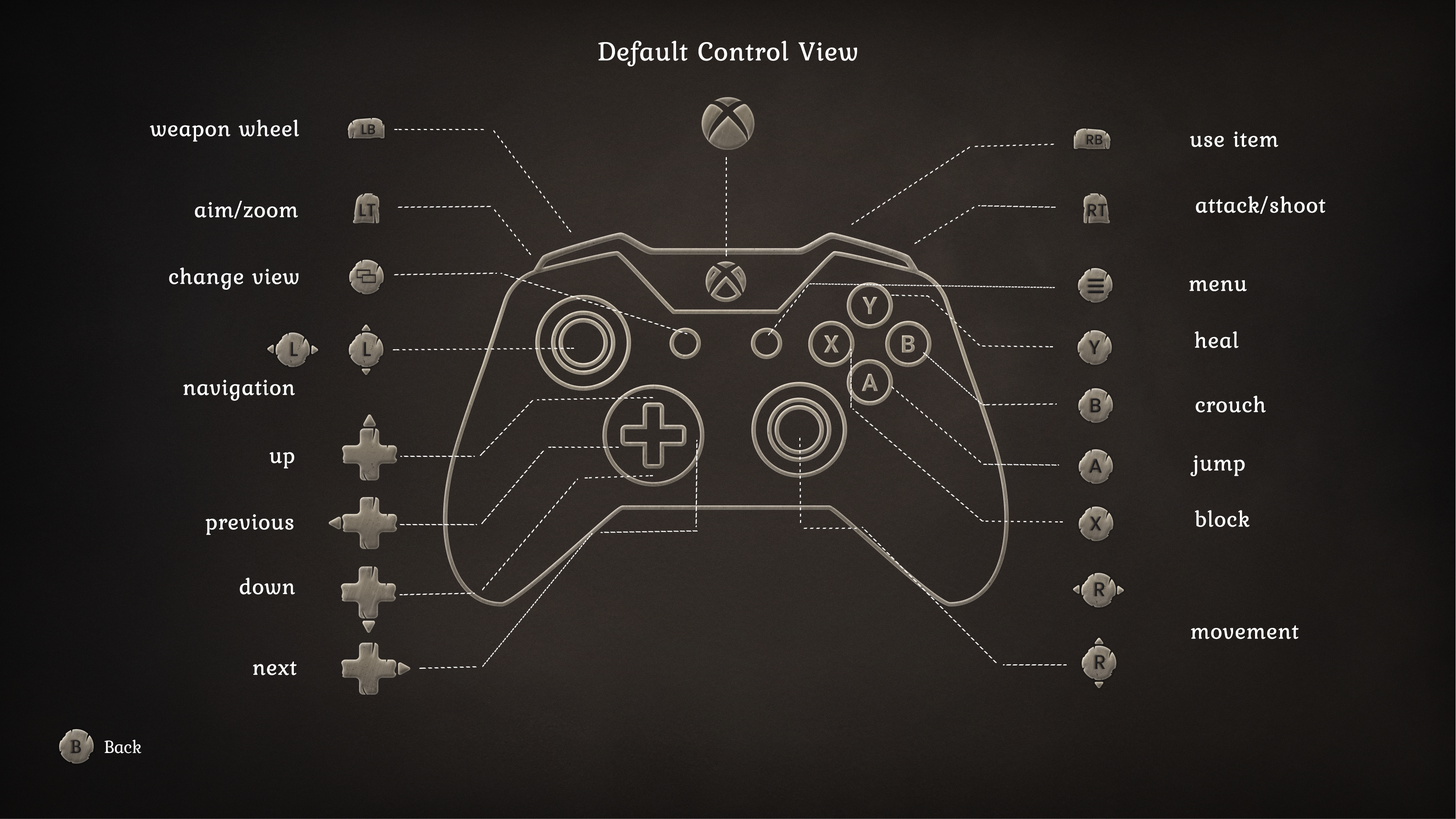
<style>
.page{position:relative;width:1456px;height:819px}
.page>*{position:absolute;margin:0}
.t1{font:27.3px "Kurale-Regular";color:#ffffff;font-weight:bold}
.t2{font:22.7px "Kurale-Regular";color:#ffffff;font-weight:bold}
.t3{font:13.6px "Poppins-Regular";color:#201e1e;font-weight:bold}
.t4{font:17.1px "Poppins-Regular";color:#201e1e;font-weight:bold}
.t5{font:19.6px "Poppins-Regular";color:#201e1e;font-weight:bold}
.t6{font:19.6px "Kurale-Regular";color:#201e1e;font-weight:bold}
.t7{font:18.2px "Kurale-Regular";letter-spacing:-0.02em;color:#ffffff}
</style>
<div class="page">
<p class="t1" style="left:598px;top:41px;width:259px;height:25px">Default Control View</p>
<p class="t2" style="left:150px;top:119px;width:149px;height:23px">weapon wheel</p>
<p class="t3" style="left:362px;top:124px;width:13px;height:10px">LB</p>
<p class="t3" style="left:1087px;top:135px;width:16px;height:9px">RB</p>
<p class="t2" style="left:1190px;top:131px;width:89px;height:16px">use item</p>
<p class="t2" style="left:1196px;top:196px;width:130px;height:18px">attack/shoot</p>
<p class="t2" style="left:195px;top:201px;width:103px;height:18px">aim/zoom</p>
<p class="t4" style="left:360px;top:204px;width:15px;height:12px">LT</p>
<p class="t4" style="left:1088px;top:204px;width:19px;height:12px">RT</p>
<p class="t2" style="left:169px;top:267px;width:129px;height:23px">change view</p>
<p class="t2" style="left:1189px;top:280px;width:58px;height:11px">menu</p>
<p class="t5" style="left:1089px;top:340px;width:11px;height:14px">Y</p>
<p class="t2" style="left:1195px;top:331px;width:44px;height:17px">heal</p>
<p class="t5" style="left:291px;top:342px;width:7px;height:14px">L</p>
<p class="t5" style="left:364px;top:342px;width:7px;height:14px">L</p>
<p class="t2" style="left:183px;top:380px;width:112px;height:21px">navigation</p>
<p class="t5" style="left:1091px;top:398px;width:10px;height:15px">B</p>
<p class="t2" style="left:1195px;top:395px;width:71px;height:18px">crouch</p>
<p class="t2" style="left:270px;top:452px;width:24px;height:17px">up</p>
<p class="t5" style="left:1089px;top:459px;width:13px;height:14px">A</p>
<p class="t2" style="left:1190px;top:455px;width:55px;height:21px">jump</p>
<p class="t2" style="left:1195px;top:510px;width:55px;height:17px">block</p>
<p class="t2" style="left:206px;top:514px;width:87px;height:21px">previous</p>
<p class="t5" style="left:1090px;top:516px;width:11px;height:14px">X</p>
<p class="t2" style="left:240px;top:577px;width:55px;height:18px">down</p>
<p class="t5" style="left:1095px;top:582px;width:9px;height:14px">R</p>
<p class="t2" style="left:1191px;top:625px;width:108px;height:14px">movement</p>
<p class="t2" style="left:253px;top:661px;width:44px;height:14px">next</p>
<p class="t5" style="left:1095px;top:655px;width:10px;height:14px">R</p>
<p class="t6" style="left:71px;top:740px;width:10px;height:13px">B</p>
<p class="t7" style="left:104px;top:740px;width:37px;height:13px">Back</p>
</div>
